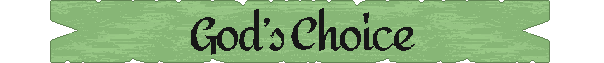
<style>
.page{position:relative;width:604px;height:63px;background:#87b676}
.page>*{position:absolute;margin:0}
.t1{font:45px "God'sChoice-Bold";letter-spacing:-0.065em;color:#000000}
</style>
<div class="page">
<p class="t1" style="left:191px;top:8px;width:224px;height:47px">God’s Choice</p>
</div>
